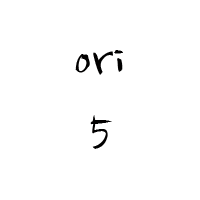
<style>
.page{position:relative;width:200px;height:200px;background:#ffffff}
.page>*{position:absolute;margin:0}
.t1{font:60px/72px "NanumBrush";color:#010000}
</style>
<div class="page">
<p class="t1" style="left:75px;top:50px;width:48px;height:99px;text-align:center">ori<br>5</p>
</div>
